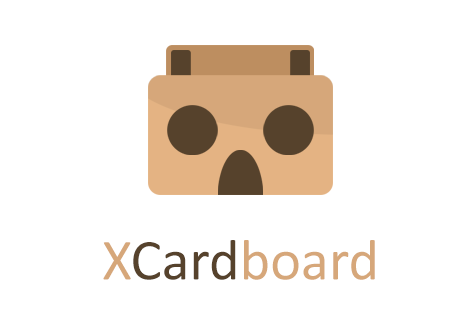
<style>
.page{position:relative;width:470px;height:320px;background:#ffffff}
.page>*{position:absolute;margin:0}
.t1{font:57.9px "Calibri";color:#d6a77a}
.t2{font:57.9px "Calibri";color:#56422c}
</style>
<div class="page">
<p class="t1" style="left:103px;top:240px;width:272px;height:40px">X<span class="t2">Card</span>board</p>
</div>
